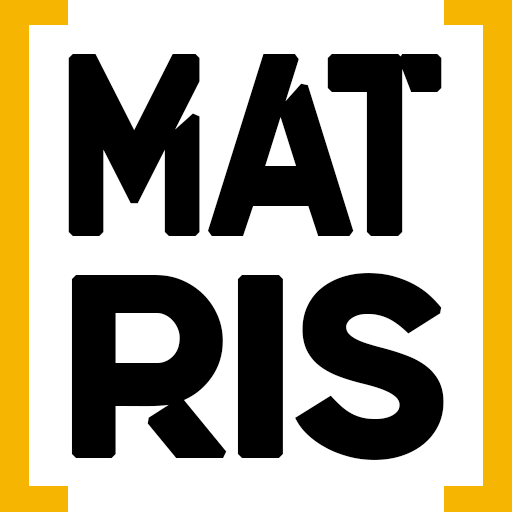
<style>
.page{position:relative;width:512px;height:512px;background:#ffffff}
.page>*{position:absolute;margin:0}
.t1{font:248.8px "Quantify";color:#000000;font-weight:bold;scale:0.76 1}
.t2{font:249.8px "Quantify";color:#000000;font-weight:bold}
</style>
<div class="page">
<p class="t1" style="left:68px;top:54px;width:374px;height:182px">MAT</p>
<p class="t2" style="left:71px;top:273px;width:373px;height:187px">RIS</p>
</div>
